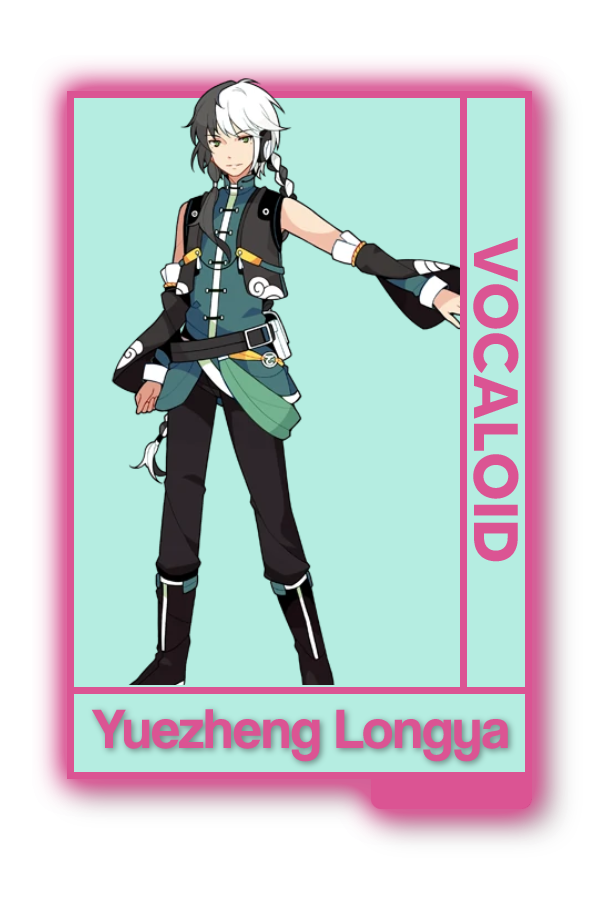
<style>
.page{position:relative;width:600px;height:900px;background:#b5ede1}
.page>*{position:absolute;margin:0}
.t1{font:62.5px "MADETOMMY-Bold";color:#db5493}
.t2{font:57.5px "CoolveticaRg-Regular";color:#db5493}
</style>
<div class="page">
<p class="t1" style="left:473px;top:237px;width:46px;height:325px;rotate:90deg">VOCALOID</p>
<p class="t2" style="left:91px;top:709px;width:417px;height:53px">Yuezheng Longya</p>
</div>
